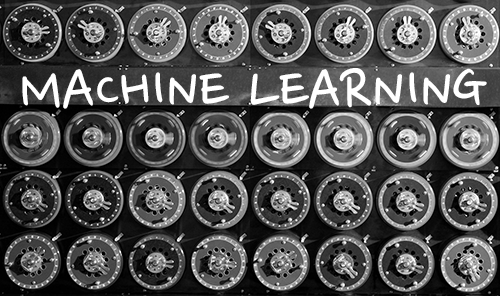
<style>
.page{position:relative;width:500px;height:296px}
.page>*{position:absolute;margin:0}
.t1{font:70.8px "NanumPenOTF";color:#ffffff}
</style>
<div class="page">
<p class="t1" style="left:22px;top:68px;width:465px;height:41px">MACHINE LEARNING</p>
</div>
